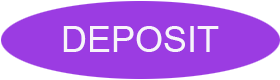
<style>
.page{position:relative;width:280px;height:80px;background:#9b3ce2}
.page>*{position:absolute;margin:0}
.t1{font:36px "ArialMT";color:#f7f4f9}
</style>
<div class="page">
<p class="t1" style="left:63px;top:26px;width:156px;height:26px">DEPOSIT</p>
</div>
